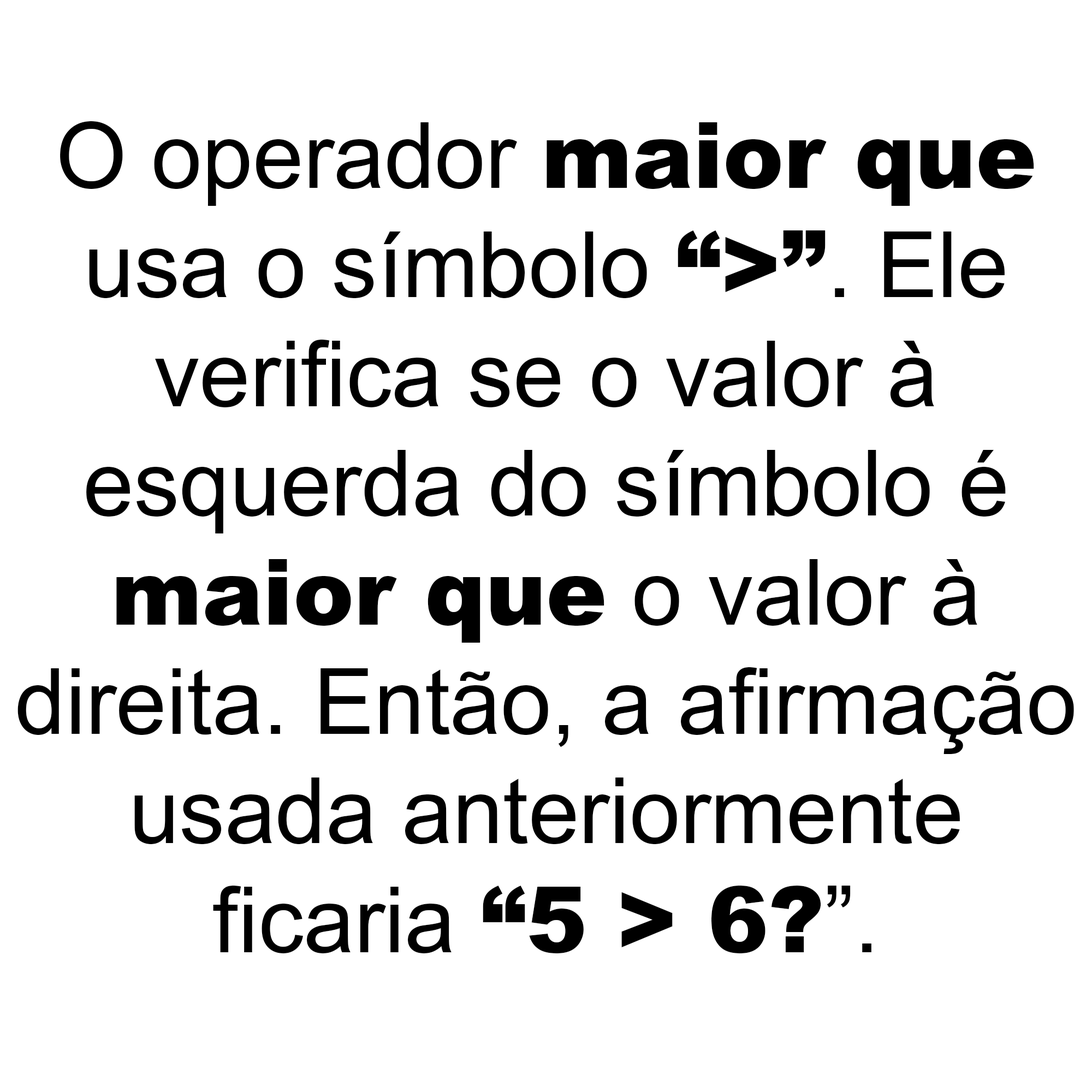
<style>
.page{position:relative;width:1092px;height:1092px;background:#ffffff}
.page>*{position:absolute;margin:0}
.t1{font:91px "ArialMT";color:#000000}
.t2{font:91px "Arial-Black";color:#000000}
</style>
<div class="page">
<p class="t1" style="left:17px;top:121px;width:1057px;height:832px;text-align:center">O operador <span class="t2">maior que</span><br>usa o símbolo <span class="t2">“&gt;”</span>. Ele<br>verifica se o valor à<br>esquerda do símbolo é<br><span class="t2">maior que</span> o valor à<br>direita. Então, a afirmação<br>usada anteriormente<br>ficaria <span class="t2">“5 &gt; 6?</span>”.</p>
</div>
